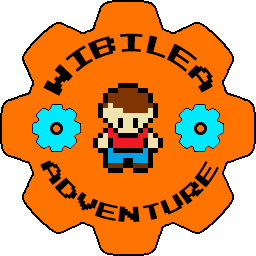
<style>
.page{position:relative;width:256px;height:256px;background:#ff7300}
.page>*{position:absolute;margin:0}
.t1{font:20px "PressStart2P-Regular";color:#000000}
.t2{font:17px "PressStart2P-Regular";color:#000000}
</style>
<div class="page">
<p class="t1" style="left:43px;top:33px;width:170px;height:63px">WIBILEA</p>
<p class="t2" style="left:40px;top:160px;width:179px;height:62px">ADVENTURE</p>
</div>
